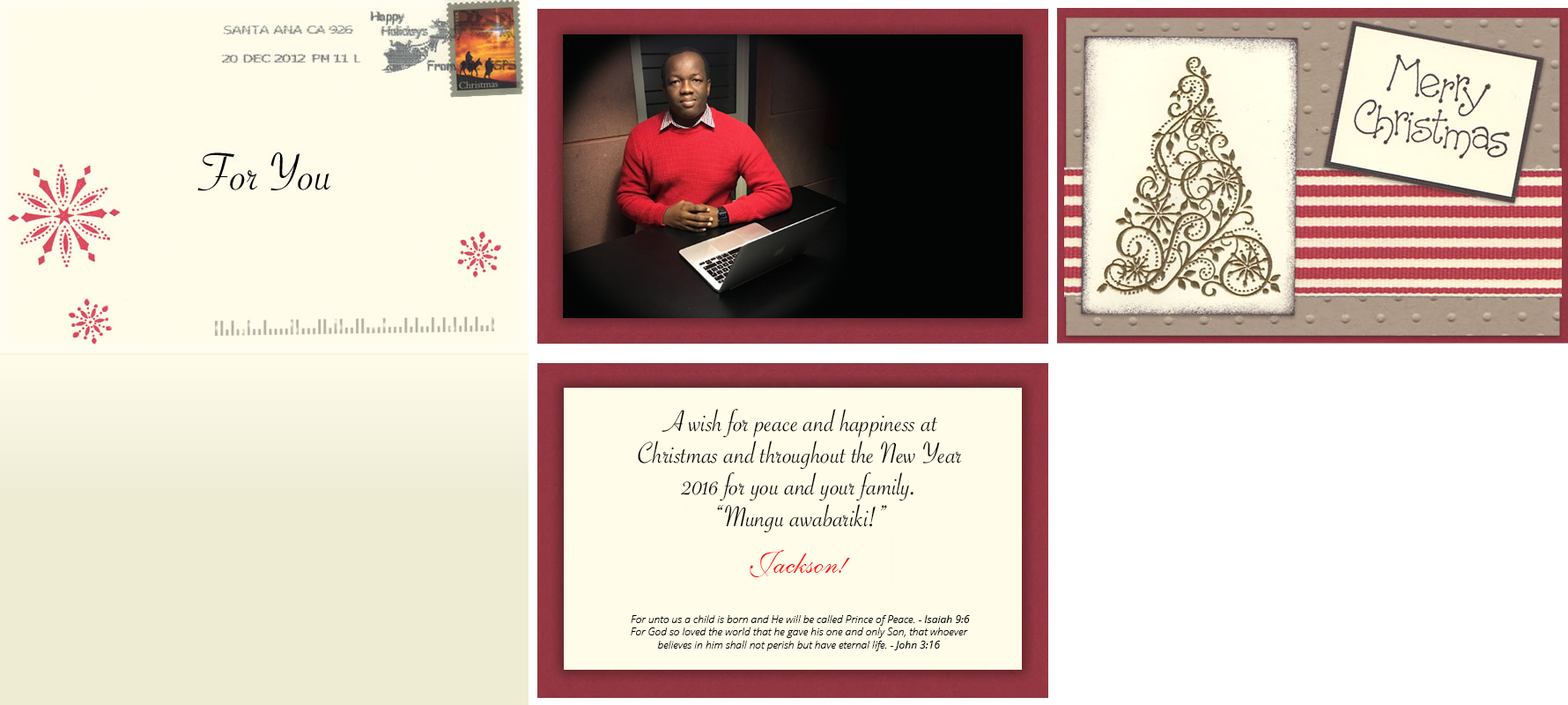
<style>
.page{position:relative;width:1568px;height:705px}
.page>*{position:absolute;margin:0}
.t1{font:31.7px/31.7px "SavoyeLetPlain";color:#000000}
.t2{font:31.7px "ShelleyVolanteBT-Regular";color:#ff1111}
.t3{font:10.6px "OpenSansLight-Italic";color:#000000}
.t4{font:10.6px "OpenSans-Italic";color:#000000}
</style>
<div class="page">
<p class="t1" style="left:638px;top:409px;width:323px;height:124px;text-align:center">A wish for peace and happiness at<br>Christmas and throughout the New Year<br>2016 for you and your family.<br>“Mungu awabariki!”</p>
<p class="t2" style="left:750px;top:550px;width:100px;height:27px">Jackson!</p>
<p class="t3" style="left:631px;top:615px;width:339px;height:36px;text-align:center">For unto us a child is born and He will be called Prince of Peace. - <span class="t4">Isaiah 9:6<br></span>For God so loved the world that he gave his one and only Son, that whoever <br>believes in him shall not perish but have eternal life. -<span class="t4"> John 3:16</span></p>
</div>
